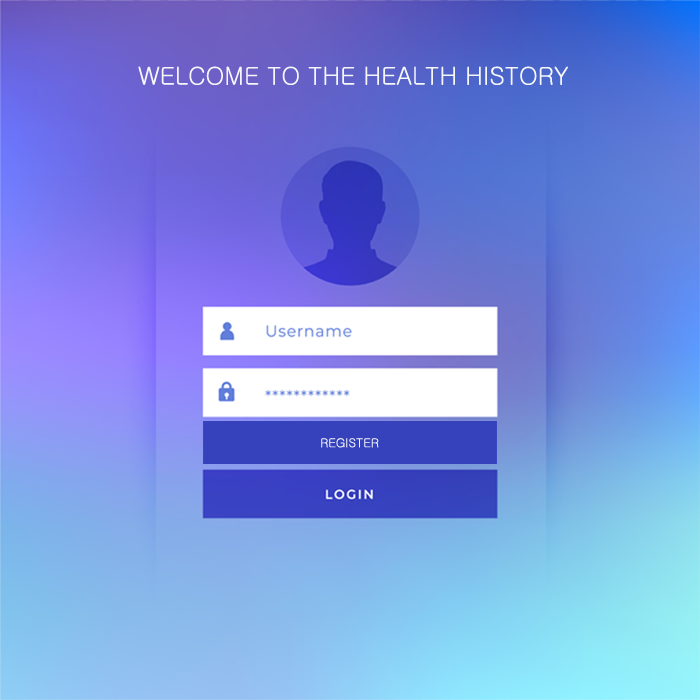
<style>
.page{position:relative;width:700px;height:700px}
.page>*{position:absolute;margin:0}
.t1{font:24.3px "Gulim";color:#f6f7fb}
.t2{font:12.1px "Gulim";color:#f6f7fb}
.t3{font:14.6px "Gulim";color:#3642bc}
</style>
<div class="page">
<p class="t1" style="left:138px;top:66px;width:430px;height:19px">WELCOME TO THE HEALTH HISTORY</p>
<p class="t2" style="left:306px;top:436px;width:73px;height:12px"><span class="t3">\</span>REGISTER</p>
</div>
